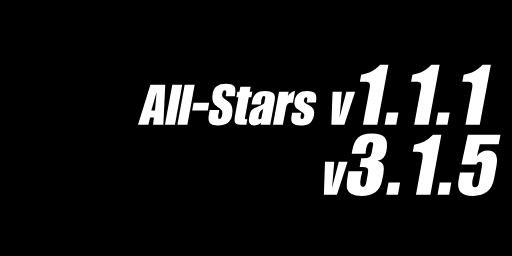
<style>
.page{position:relative;width:512px;height:256px;background:#000000}
.page>*{position:absolute;margin:0}
.t1{font:56px "Genuine2Regular";color:#ffffff;font-style:italic}
.t2{font:84px "Genuine2Regular";color:#ffffff;font-style:italic}
.t3{font:84px "GENUINE";color:#ffffff;font-style:italic}
.t4{font:56px "GENUINE";color:#ffffff;font-style:italic}
</style>
<div class="page">
<p class="t1" style="left:138px;top:64px;width:353px;height:62px">All-Stars v<span class="t2">1.1.1</span></p>
<p class="t3" style="left:323px;top:133px;width:178px;height:63px"><span class="t4">v</span>3.1.5</p>
</div>
